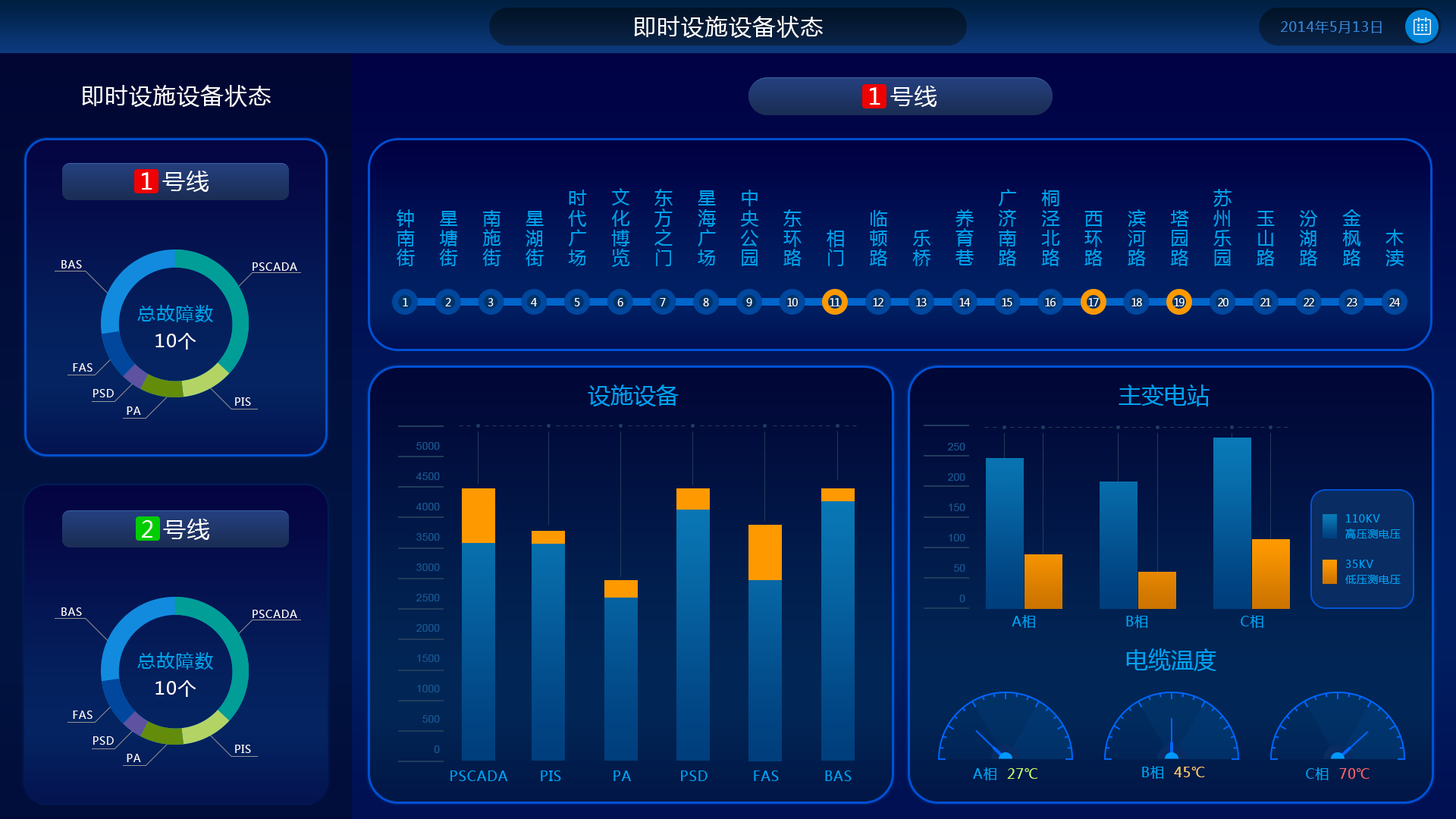
<style>
.page{position:relative;width:1456px;height:819px}
.page>*{position:absolute;margin:0}
.t1{font:22.7px "MicrosoftYaHei";letter-spacing:0.05em;color:#ffffff}
.t2{font:13.6px "MicrosoftYaHei";letter-spacing:0.05em;color:#3683d6}
.t3{font:18.2px/43px "MicrosoftYaHei";letter-spacing:0.1em;color:#00a0e9}
.t4{font:10.6px "MicrosoftYaHei";letter-spacing:0.05em;color:#ffffff}
.t5{font:18.2px/27.3px "MicrosoftYaHei";letter-spacing:0.05em;color:#00a0e9}
.t6{font:18.2px/27.3px "MicrosoftYaHei";letter-spacing:0.05em;color:#ffffff}
.t7{font:10.6px "MicrosoftYaHei";letter-spacing:-0.1em;color:#ffffff}
.t8{font:22.7px "MicrosoftYaHei";color:#00a1f2}
.t9{font:10.6px/30.3px "ArialMT";color:#19558f}
.t10{font:10.6px/15.2px "MicrosoftYaHei";letter-spacing:0.05em;color:#00a1f2}
.t11{font:13.6px "MicrosoftYaHei";letter-spacing:0.05em;color:#00a1f2}
.t12{font:13.6px "MicrosoftYaHei";letter-spacing:0.05em;color:#ccff66}
.t13{font:13.6px "MicrosoftYaHei";letter-spacing:0.05em;color:#ffcc66}
.t14{font:13.6px "MicrosoftYaHei";letter-spacing:0.05em;color:#ff6666}
</style>
<div class="page">
<p class="t1" style="left:634px;top:16px;width:189px;height:22px">即时设施设备状态</p>
<p class="t2" style="left:1281px;top:20px;width:101px;height:13px">2014年5月13日</p>
<p class="t1" style="left:82px;top:85px;width:189px;height:22px">即时设施设备状态</p>
<p class="t1" style="left:870px;top:86px;width:67px;height:21px">1 号线</p>
<p class="t1" style="left:142px;top:171px;width:67px;height:21px">1 号线</p>
<p class="t3" style="left:397px;top:188px;width:1007px;height:79px;text-align:right">木渎<br>金枫路<br>汾湖路<br>玉山路<br>苏州乐园<br>塔园路<br>滨河路<br>西环路<br>桐泾北路<br>广济南路<br>养育巷<br>乐桥<br>临顿路<br>相门<br>东环路<br>中央公园<br>星海广场<br>东方之门<br>文化博览<br>时代广场<br>星湖街<br>南施街<br>星塘街<br>钟南街</p>
<p class="t4" style="left:61px;top:260px;width:21px;height:8px">BAS</p>
<p class="t4" style="left:253px;top:262px;width:44px;height:9px">PSCADA</p>
<p class="t5" style="left:137px;top:305px;width:76px;height:45px;text-align:center">总故障数<br><span class="t6">10个</span></p>
<p class="t7" style="left:403px;top:298px;width:5px;height:8px">1</p>
<p class="t7" style="left:445px;top:298px;width:6px;height:8px">2</p>
<p class="t7" style="left:488px;top:298px;width:6px;height:8px">3</p>
<p class="t7" style="left:531px;top:298px;width:6px;height:8px">4</p>
<p class="t7" style="left:575px;top:298px;width:5px;height:8px">5</p>
<p class="t7" style="left:617px;top:298px;width:6px;height:8px">6</p>
<p class="t7" style="left:660px;top:298px;width:6px;height:8px">7</p>
<p class="t7" style="left:703px;top:298px;width:6px;height:8px">8</p>
<p class="t7" style="left:746px;top:298px;width:6px;height:8px">9</p>
<p class="t7" style="left:787px;top:298px;width:11px;height:8px">10</p>
<p class="t7" style="left:830px;top:298px;width:10px;height:8px">11</p>
<p class="t7" style="left:873px;top:298px;width:10px;height:8px">12</p>
<p class="t7" style="left:916px;top:298px;width:11px;height:8px">13</p>
<p class="t7" style="left:959px;top:298px;width:12px;height:8px">14</p>
<p class="t7" style="left:1002px;top:298px;width:10px;height:8px">15</p>
<p class="t7" style="left:1045px;top:298px;width:11px;height:8px">16</p>
<p class="t7" style="left:1088px;top:298px;width:11px;height:8px">17</p>
<p class="t7" style="left:1131px;top:298px;width:11px;height:8px">18</p>
<p class="t7" style="left:1174px;top:298px;width:11px;height:8px">19</p>
<p class="t7" style="left:1218px;top:298px;width:10px;height:8px">20</p>
<p class="t7" style="left:1260px;top:298px;width:11px;height:8px">21</p>
<p class="t7" style="left:1304px;top:298px;width:10px;height:8px">22</p>
<p class="t7" style="left:1347px;top:298px;width:10px;height:8px">23</p>
<p class="t7" style="left:1389px;top:298px;width:12px;height:8px">24</p>
<p class="t4" style="left:73px;top:363px;width:20px;height:9px">FAS</p>
<p class="t4" style="left:93px;top:389px;width:21px;height:8px">PSD</p>
<p class="t8" style="left:588px;top:384px;width:91px;height:22px">设施设备</p>
<p class="t8" style="left:1119px;top:384px;width:91px;height:22px">主变电站</p>
<p class="t4" style="left:235px;top:397px;width:16px;height:9px">PIS</p>
<p class="t4" style="left:127px;top:406px;width:14px;height:9px">PA</p>
<p class="t9" style="left:416px;top:442px;width:24px;height:311px;text-align:right">5000<br>4500<br>4000<br>3500<br>3000<br>2500<br>2000<br>1500<br>1000<br>500<br>0</p>
<p class="t9" style="left:948px;top:443px;width:17px;height:159px;text-align:right">250<br>200<br>150<br>100<br>50<br>0</p>
<p class="t1" style="left:142px;top:519px;width:68px;height:21px">2 号线</p>
<p class="t10" style="left:1345px;top:514px;width:56px;height:25px">110KV<br>高压测电压</p>
<p class="t10" style="left:1345px;top:560px;width:56px;height:24px">35KV<br>低压测电压</p>
<p class="t4" style="left:61px;top:607px;width:21px;height:9px">BAS</p>
<p class="t4" style="left:253px;top:610px;width:44px;height:8px">PSCADA</p>
<p class="t11" style="left:1012px;top:615px;width:23px;height:13px">A相</p>
<p class="t11" style="left:1126px;top:615px;width:21px;height:13px">B相</p>
<p class="t11" style="left:1241px;top:615px;width:22px;height:13px">C相</p>
<p class="t5" style="left:137px;top:652px;width:76px;height:45px;text-align:center">总故障数<br><span class="t6">10个</span></p>
<p class="t8" style="left:1126px;top:648px;width:90px;height:23px">电缆温度</p>
<p class="t4" style="left:73px;top:711px;width:20px;height:8px">FAS</p>
<p class="t4" style="left:93px;top:736px;width:21px;height:9px">PSD</p>
<p class="t4" style="left:235px;top:745px;width:16px;height:8px">PIS</p>
<p class="t4" style="left:127px;top:754px;width:14px;height:8px">PA</p>
<p class="t11" style="left:450px;top:770px;width:58px;height:11px">PSCADA</p>
<p class="t11" style="left:541px;top:770px;width:20px;height:11px">PIS</p>
<p class="t11" style="left:613px;top:770px;width:18px;height:11px">PA</p>
<p class="t11" style="left:681px;top:770px;width:27px;height:11px">PSD</p>
<p class="t11" style="left:754px;top:770px;width:25px;height:11px">FAS</p>
<p class="t11" style="left:825px;top:770px;width:27px;height:11px">BAS</p>
<p class="t12" style="left:973px;top:767px;width:64px;height:13px"><span class="t11">A相  </span>27℃</p>
<p class="t13" style="left:1142px;top:766px;width:63px;height:13px"><span class="t11">B相  </span>45℃</p>
<p class="t14" style="left:1306px;top:767px;width:64px;height:13px"><span class="t11">C相  </span>70℃</p>
</div>
